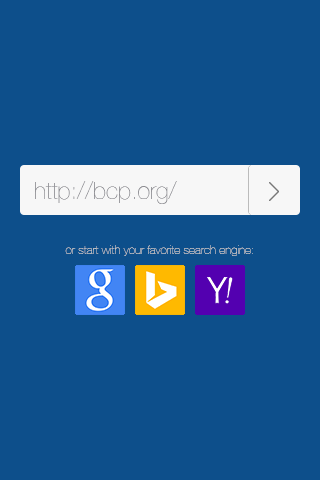
<style>
.page{position:relative;width:320px;height:480px;background:#0d4f8b}
.page>*{position:absolute;margin:0}
.t1{font:24px "HelveticaNeue-UltraLight";color:#8e8e93}
.t2{font:12px "HelveticaNeue-UltraLight";color:#c7c7c7}
</style>
<div class="page">
<p class="t1" style="left:35px;top:181px;width:142px;height:23px">http://bcp.org/</p>
<p class="t2" style="left:65px;top:245px;width:188px;height:11px">or start with your favorite search engine:</p>
</div>
